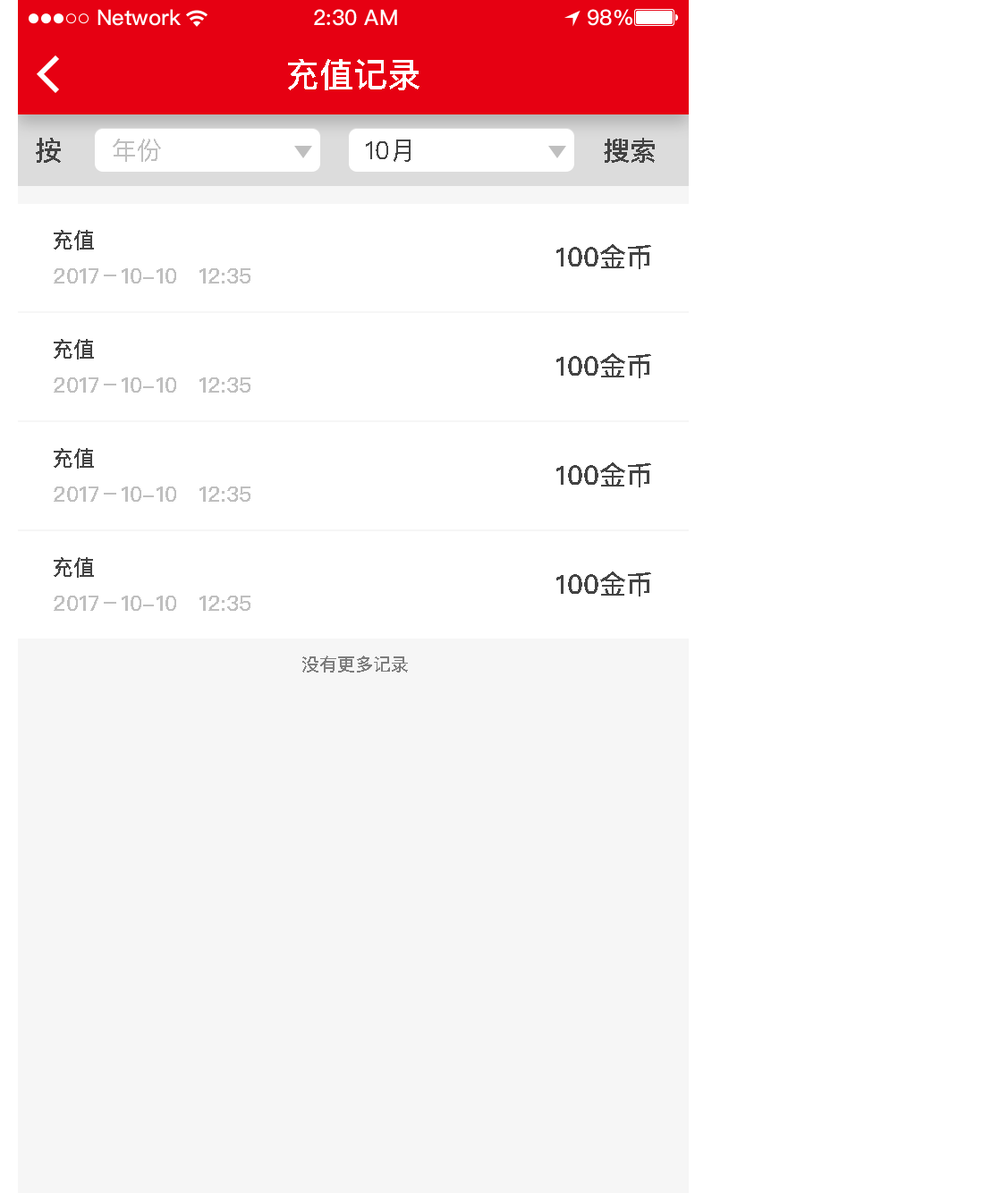
<style>
.page{position:relative;width:1000px;height:1193px;background:#ffffff}
.page>*{position:absolute;margin:0}
.t1{font:34px "PingFangSC-Medium";color:#ffffff;text-transform:uppercase}
.t2{font:26.8px "PingFangSC-Medium";color:#434343;text-transform:uppercase}
.t3{font:25px "PingFangSC-Regular";color:#bfbfbf;text-transform:uppercase}
.t4{font:25px "PingFangSC-Regular";color:#434343;text-transform:uppercase}
.t5{font:21.5px "PingFangSC-Medium";color:#434343;text-transform:uppercase}
.t6{font:21.5px "PingFangSC-Medium";color:#bfbfbf;text-transform:uppercase}
.t7{font:17.9px "PingFangSC-Medium";color:#7d7d7d;text-transform:uppercase}
</style>
<div class="page">
<p class="t1" style="left:288px;top:59px;width:131px;height:31px">充值记录</p>
<p class="t2" style="left:36px;top:138px;width:25px;height:25px">按</p>
<p class="t2" style="left:604px;top:138px;width:51px;height:25px">搜索</p>
<p class="t3" style="left:113px;top:139px;width:48px;height:23px">年份</p>
<p class="t4" style="left:366px;top:139px;width:44px;height:23px">10月</p>
<p class="t5" style="left:54px;top:230px;width:40px;height:20px">充值</p>
<p class="t2" style="left:556px;top:244px;width:95px;height:25px">100金币</p>
<p class="t6" style="left:54px;top:268px;width:196px;height:15px">2017－10-10   12:35</p>
<p class="t5" style="left:54px;top:339px;width:40px;height:20px">充值</p>
<p class="t2" style="left:556px;top:353px;width:95px;height:25px">100金币</p>
<p class="t6" style="left:54px;top:377px;width:196px;height:16px">2017－10-10   12:35</p>
<p class="t5" style="left:54px;top:448px;width:40px;height:21px">充值</p>
<p class="t2" style="left:556px;top:462px;width:95px;height:25px">100金币</p>
<p class="t6" style="left:54px;top:486px;width:196px;height:16px">2017－10-10   12:35</p>
<p class="t5" style="left:54px;top:557px;width:40px;height:21px">充值</p>
<p class="t2" style="left:556px;top:571px;width:95px;height:25px">100金币</p>
<p class="t6" style="left:54px;top:596px;width:196px;height:15px">2017－10-10   12:35</p>
<p class="t7" style="left:302px;top:655px;width:106px;height:17px">没有更多记录</p>
</div>
